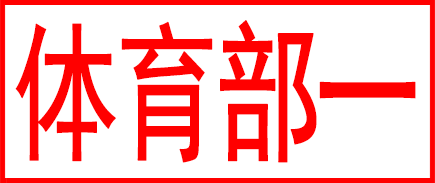
<style>
.page{position:relative;width:435px;height:183px;background:#ffffff}
.page>*{position:absolute;margin:0}
.t1{font:153.5px "SimHei";letter-spacing:-0.08em;color:#ff0000;font-weight:bold;scale:0.69 1}
</style>
<div class="page">
<p class="t1" style="left:15px;top:20px;width:401px;height:143px">体育部一</p>
</div>
